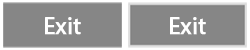
<style>
.page{position:relative;width:250px;height:50px;background:#868686}
.page>*{position:absolute;margin:0}
.t1{font:24px "MyriadPro-Regular";color:#ffffff;font-weight:bold}
</style>
<div class="page">
<p class="t1" style="left:45px;top:17px;width:36px;height:18px">Exit</p>
<p class="t1" style="left:170px;top:17px;width:36px;height:18px">Exit</p>
</div>
